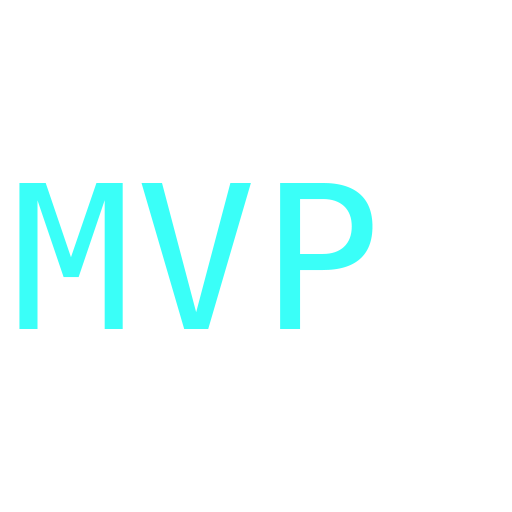
<style>
.page{position:relative;width:512px;height:512px;background:#ffffff}
.page>*{position:absolute;margin:0}
.t1{font:200px "DejaVuSansMono";letter-spacing:0.025em;color:#3afff8}
.t2{font:200px "DejaVuSansMono";letter-spacing:0.025em;color:#ffffff}
</style>
<div class="page">
<p class="t1" style="left:19px;top:183px;width:480px;height:146px">MVP<span class="t2">+</span></p>
</div>
